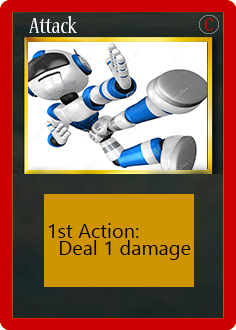
<style>
.page{position:relative;width:236px;height:330px}
.page>*{position:absolute;margin:0}
.t1{font:24px "NuevaStd-Cond";color:#ffffff}
.t2{font:18px "SimSun-ExtB";color:#cc0000}
.t3{font:20px "LeelawadeeUI";color:#000000}
</style>
<div class="page">
<p class="t1" style="left:29px;top:16px;width:48px;height:17px">Attack</p>
<p class="t2" style="left:204px;top:18px;width:9px;height:13px">C</p>
<p class="t3" style="left:48px;top:223px;width:91px;height:15px">1st Action:</p>
<p class="t3" style="left:60px;top:240px;width:131px;height:20px">Deal 1 damage</p>
</div>
